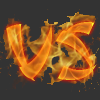
<style>
.page{position:relative;width:100px;height:100px;background:#333333}
.page>*{position:absolute;margin:0}
.t1{font:72px "JingJing"}
</style>
<div class="page">
<p class="t1" style="left:6px;top:22px;width:91px;height:59px">VS</p>
</div>
